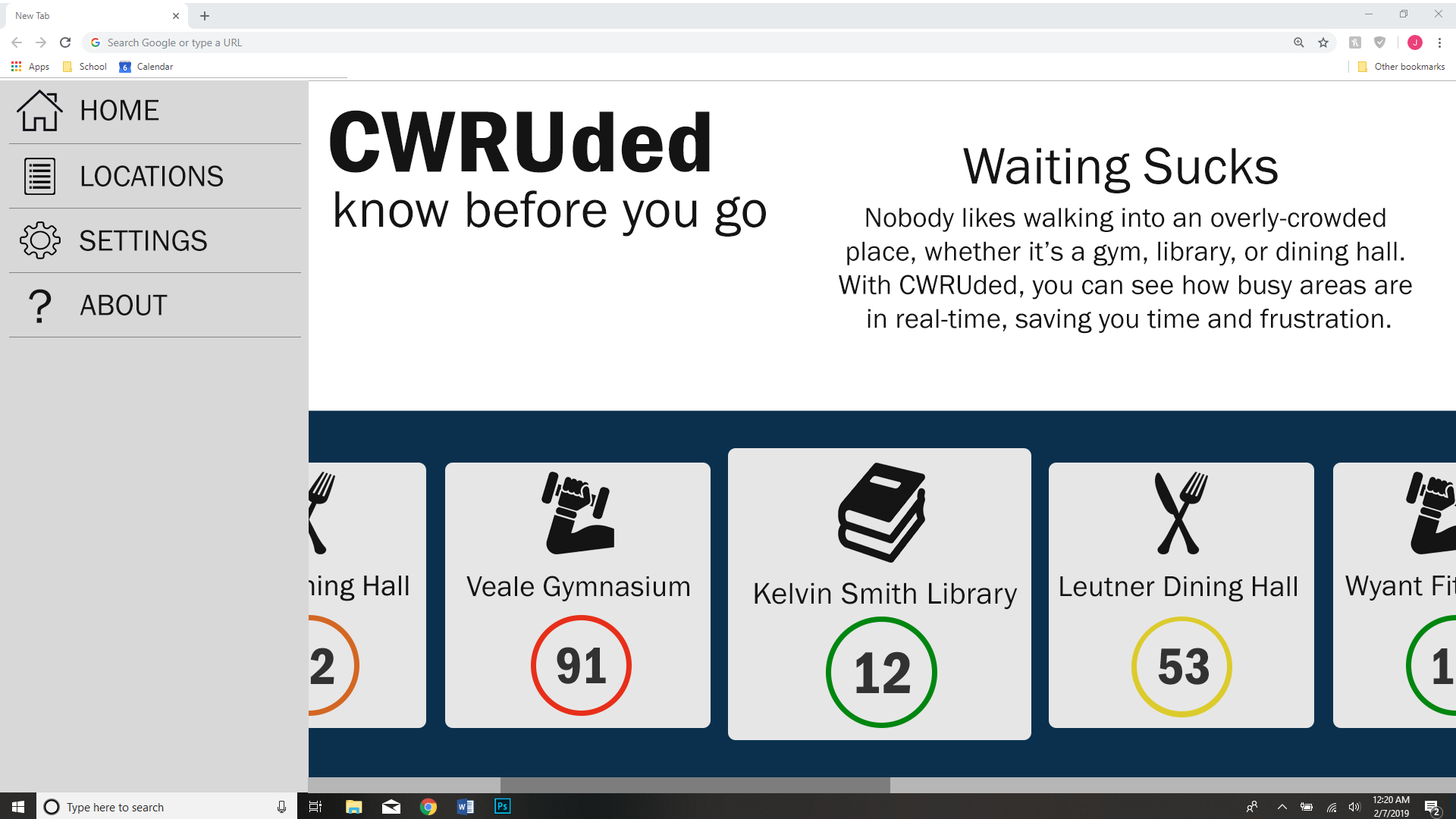
<style>
.page{position:relative;width:1456px;height:819px;background:#ffffff}
.page>*{position:absolute;margin:0}
.t1{font:30.3px "FranklinGothic-Book";letter-spacing:0.005em;color:#141414}
.t2{font:89.4px "FranklinGothic-DemiCond";letter-spacing:0.005em;color:#141414;scale:1.14 1}
.t3{font:53.1px "FranklinGothic-Book";letter-spacing:0.005em;color:#141414}
.t4{font:28.1px "FranklinGothic-Book";letter-spacing:0.005em;color:#141414}
.t5{font:49.3px "FranklinGothic-Book";letter-spacing:0.005em;color:#141414}
.t6{font:29.6px "FranklinGothic-Book";letter-spacing:0.005em;color:#141414}
.t7{font:31.1px "FranklinGothic-Book";letter-spacing:0.005em;color:#141414}
.t8{font:53.1px "FranklinGothic-DemiCond";letter-spacing:0.005em}
.t9{font:53.1px "FranklinGothic-DemiCond";letter-spacing:0.005em;color:#323232}
.t10{font:60.7px "FranklinGothic-DemiCond";letter-spacing:0.005em;color:#323232}
</style>
<div class="page">
<p class="t1" style="left:81px;top:99px;width:78px;height:22px">HOME</p>
<p class="t2" style="left:330px;top:110px;width:380px;height:63px">CWRUded</p>
<p class="t3" style="left:963px;top:147px;width:315px;height:46px">Waiting Sucks</p>
<p class="t1" style="left:81px;top:165px;width:142px;height:22px">LOCATIONS</p>
<p class="t3" style="left:335px;top:190px;width:431px;height:47px">know before you go</p>
<p class="t4" style="left:839px;top:208px;width:573px;height:126px;text-align:center">Nobody likes walking into an overly-crowded <br>place, whether it’s a gym, library, or dining hall. <br>With CWRUded, you can see how busy areas are <br>in real-time, saving you time and frustration.</p>
<p class="t1" style="left:80px;top:230px;width:127px;height:21px">SETTINGS</p>
<p class="t5" style="left:29px;top:289px;width:23px;height:34px">?</p>
<p class="t1" style="left:80px;top:294px;width:88px;height:21px">ABOUT</p>
<p class="t6" style="left:466px;top:576px;width:223px;height:25px">Veale Gymnasium</p>
<p class="t6" style="left:1060px;top:576px;width:237px;height:26px">Leutner Dining Hall</p>
<p class="t7" style="left:755px;top:582px;width:263px;height:28px">Kelvin Smith Library</p>
<p class="t8" style="left:284px;top:648px;width:50px;height:36px">72</p>
<p class="t9" style="left:557px;top:647px;width:49px;height:37px">91</p>
<p class="t10" style="left:856px;top:651px;width:55px;height:42px">12</p>
<p class="t9" style="left:1158px;top:648px;width:51px;height:37px">53</p>
</div>
